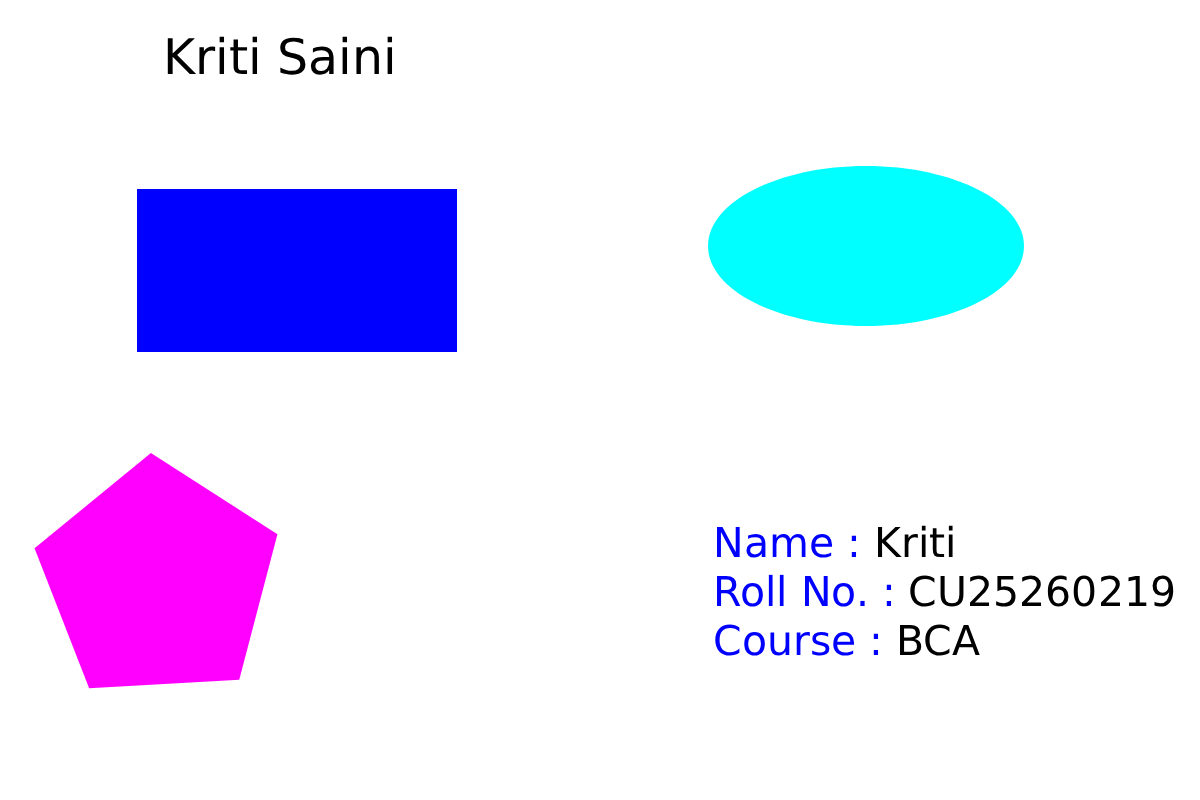
<style>
.page{position:relative;width:1200px;height:800px;background:#ffffff}
.page>*{position:absolute;margin:0}
.t1{font:49px "DejaVuSans";color:#000000}
.t2{font:41px "DejaVuSans";color:#0000ff}
.t3{font:41px "DejaVuSans";color:#000000}
</style>
<div class="page">
<p class="t1" style="left:167px;top:36px;width:226px;height:39px">Kriti Saini</p>
<p class="t2" style="left:715px;top:525px;width:459px;height:131px">Name : <span class="t3">Kriti<br></span>Roll No. : <span class="t3">CU25260219<br></span>Course : <span class="t3">BCA</span></p>
</div>
